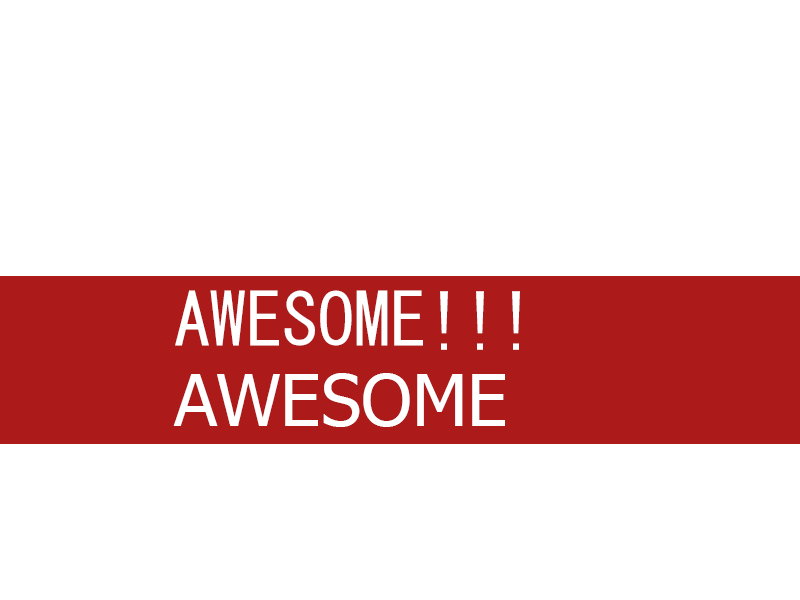
<style>
.page{position:relative;width:800px;height:600px;background:#ffffff}
.page>*{position:absolute;margin:0}
.t1{font:72px "MS-Gothic";color:#ffffff}
.t2{font:72px "Tahoma";color:#ffffff}
</style>
<div class="page">
<p class="t1" style="left:175px;top:290px;width:345px;height:60px">AWESOME!!!</p>
<p class="t2" style="left:173px;top:373px;width:332px;height:54px">AWESOME</p>
</div>
